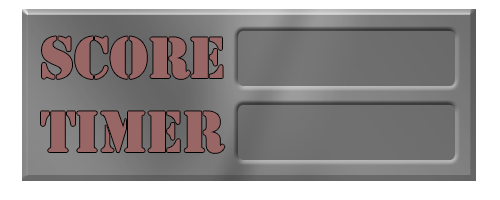
<style>
.page{position:relative;width:500px;height:200px;background:#ffffff}
.page>*{position:absolute;margin:0}
.t1{font:54px "StencilStd";color:#996666}
</style>
<div class="page">
<p class="t1" style="left:42px;top:36px;width:181px;height:43px">SCORE</p>
<p class="t1" style="left:41px;top:111px;width:184px;height:42px">Timer</p>
</div>
